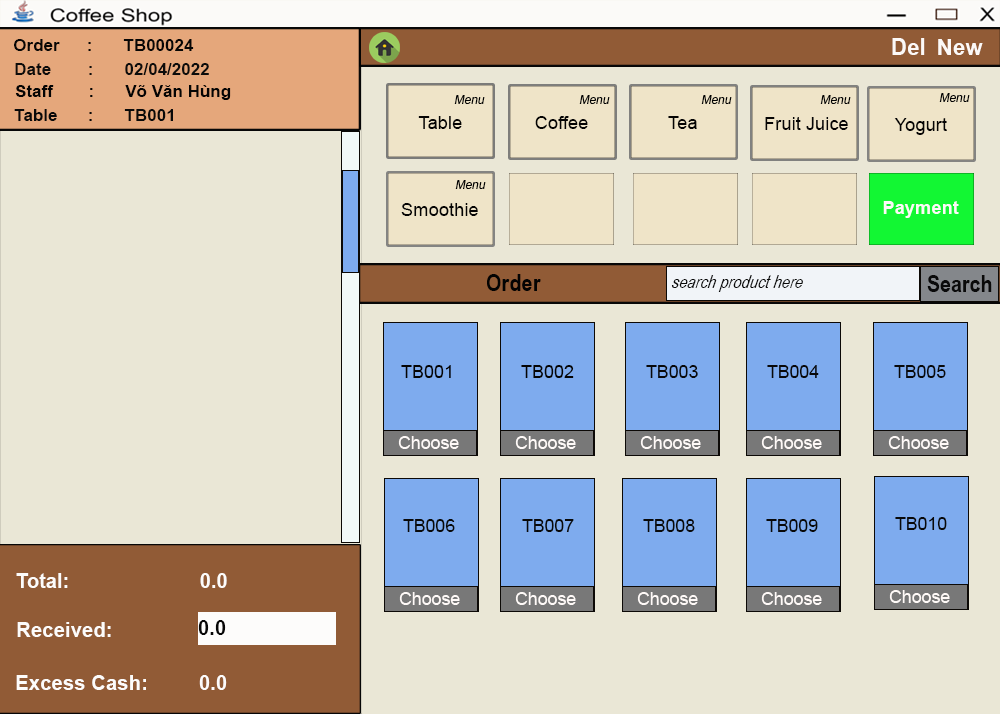
<style>
.page{position:relative;width:1000px;height:714px;background:#eae7d6}
.page>*{position:absolute;margin:0}
.t1{font:17px "Arial-BoldMT";color:#070605}
.t2{font:22.7px "Arial-BoldMT";color:#fcf9f7}
.t3{font:22.4px "Arial-BoldMT";color:#fcf9f7}
.t4{font:17px "Arial-BoldMT";color:#0c0c0b}
.t5{font:17px "Arial-BoldMT";color:#040404}
.t6{font:12px "ArialMT";color:#030303;font-style:italic}
.t7{font:11.8px "ArialMT";color:#030303;font-style:italic}
.t8{font:17px "Arial-BoldMT";color:#090909}
.t9{font:18.4px "ArialMT";color:#050404}
.t10{font:24.5px "ArialNarrow-Bold";color:#030303}
.t11{font:18px "ArialNarrow-Italic";color:#0a0a0a;font-style:italic}
.t12{font:24px "ArialNarrow-Bold";color:#0a0a0a}
.t13{font:18px "ArialMT";color:#050404}
.t14{font:17.8px "ArialMT";color:#050404}
.t15{font:17.8px "ArialMT";color:#090909}
.t16{font:20px "Arial-BoldMT";color:#fdfcfb}
.t17{font:20.4px "Arial-BoldMT";color:#fdfcfb}
.t18{font:20.4px "Arial-BoldMT";color:#070707}
</style>
<div class="page">
<p class="t1" style="left:14px;top:39px;width:180px;height:12px">Order : TB00024</p>
<p class="t2" style="left:892px;top:38px;width:33px;height:17px">Del</p>
<p class="t3" style="left:938px;top:39px;width:45px;height:16px">New</p>
<p class="t4" style="left:15px;top:63px;width:194px;height:12px">Date :  02/04/2022</p>
<p class="t5" style="left:15px;top:85px;width:216px;height:15px">Staff :  Võ Văn Hùng</p>
<p class="t6" style="left:454px;top:95px;width:31px;height:9px">Menu</p>
<p class="t7" style="left:579px;top:95px;width:31px;height:9px">Menu</p>
<p class="t7" style="left:701px;top:95px;width:31px;height:9px">Menu</p>
<p class="t7" style="left:820px;top:95px;width:31px;height:9px">Menu</p>
<p class="t7" style="left:939px;top:93px;width:31px;height:9px">Menu</p>
<p class="t8" style="left:14px;top:109px;width:159px;height:12px">Table : TB001</p>
<p class="t9" style="left:418px;top:116px;width:44px;height:13px">Table</p>
<p class="t9" style="left:535px;top:116px;width:53px;height:13px">Coffee</p>
<p class="t7" style="left:455px;top:180px;width:31px;height:9px">Menu</p>
<p class="t9" style="left:401px;top:203px;width:77px;height:13px">Smoothie</p>
<p class="t10" style="left:487px;top:274px;width:54px;height:17px">Order</p>
<p class="t11" style="left:671px;top:275px;width:132px;height:17px">search product here</p>
<p class="t12" style="left:927px;top:275px;width:65px;height:17px">Search</p>
<p class="t13" style="left:401px;top:365px;width:50px;height:13px">TB001</p>
<p class="t14" style="left:521px;top:365px;width:53px;height:13px">TB002</p>
<p class="t15" style="left:646px;top:365px;width:52px;height:13px">TB003</p>
<p class="t15" style="left:767px;top:365px;width:52px;height:13px">TB004</p>
<p class="t15" style="left:894px;top:365px;width:52px;height:13px">TB005</p>
<p class="t15" style="left:403px;top:519px;width:52px;height:13px">TB006</p>
<p class="t15" style="left:522px;top:519px;width:52px;height:13px">TB007</p>
<p class="t15" style="left:643px;top:519px;width:52px;height:13px">TB008</p>
<p class="t15" style="left:766px;top:519px;width:52px;height:13px">TB009</p>
<p class="t15" style="left:895px;top:517px;width:52px;height:13px">TB010</p>
<p class="t16" style="left:16px;top:573px;width:211px;height:15px">Total:                   0.0</p>
<p class="t17" style="left:17px;top:622px;width:94px;height:15px">Received:</p>
<p class="t18" style="left:198px;top:620px;width:28px;height:15px">0.0</p>
<p class="t17" style="left:16px;top:675px;width:211px;height:15px">Excess Cash:  0.0</p>
</div>
